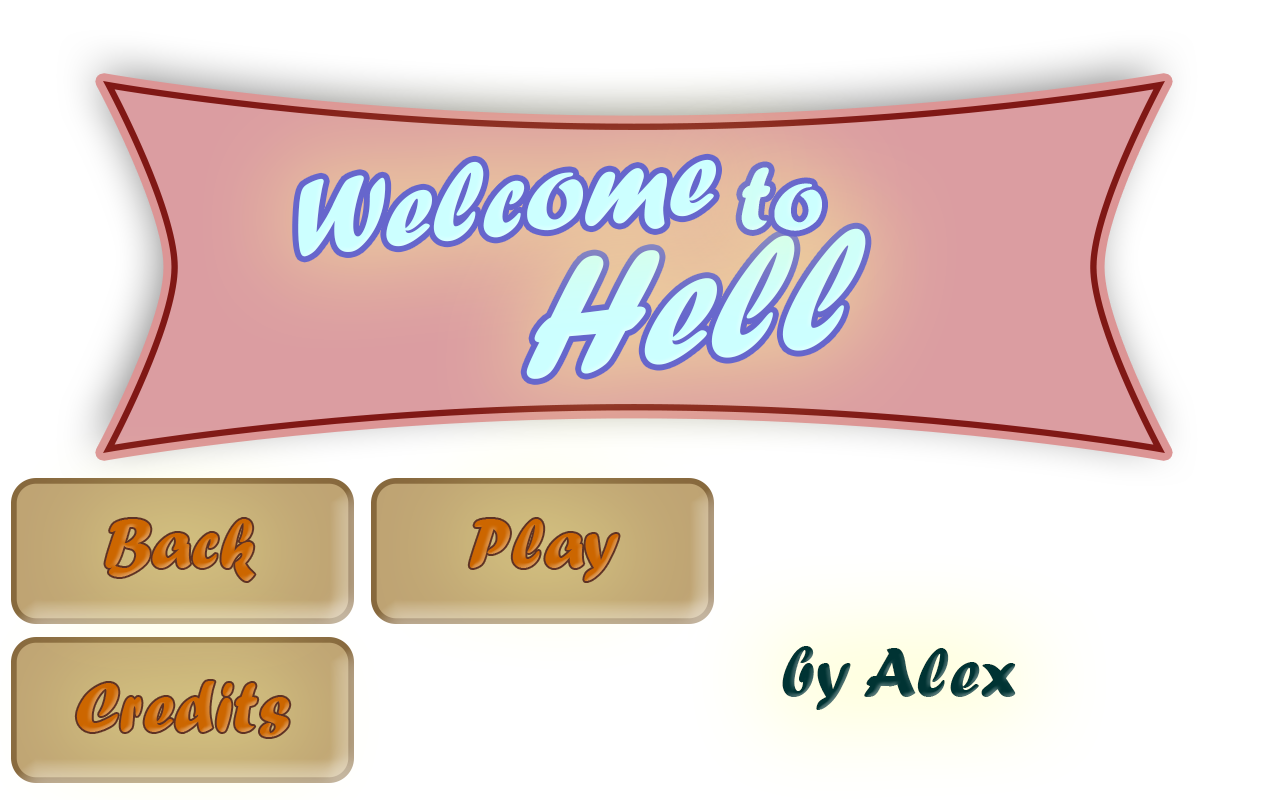
<style>
.page{position:relative;width:1280px;height:800px;background:#ffffff}
.page>*{position:absolute;margin:0}
.t1{font:114.3px "ForteMT";color:#ccffff}
.t2{font:95.8px "ForteMT";color:#ccffff}
.t3{font:180.3px "ForteMT";color:#ccffff;scale:0.86 1}
.t4{font:72px "ForteMT";color:#cc6600}
.t5{font:72px "ForteMT";color:#003333}
</style>
<div class="page">
<p class="t1" style="left:298px;top:159px;width:418px;height:98px;rotate:-6deg">Welcome</p>
<p class="t2" style="left:741px;top:167px;width:81px;height:64px;rotate:-1deg">to</p>
<p class="t3" style="left:526px;top:228px;width:340px;height:151px;rotate:-6deg">Hell</p>
<p class="t4" style="left:105px;top:519px;width:150px;height:62px">Back</p>
<p class="t4" style="left:469px;top:519px;width:150px;height:62px">Play</p>
<p class="t5" style="left:782px;top:646px;width:234px;height:64px">by Alex</p>
<p class="t4" style="left:76px;top:681px;width:214px;height:56px">Credits</p>
</div>
